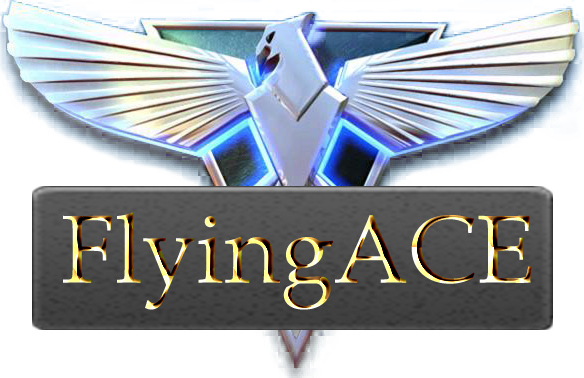
<style>
.page{position:relative;width:584px;height:378px;background:#ffffff}
.page>*{position:absolute;margin:0}
.t1{font:96px "BookAntiqua"}
</style>
<div class="page">
<p class="t1" style="left:63px;top:212px;width:469px;height:98px">FlyingACE</p>
</div>
